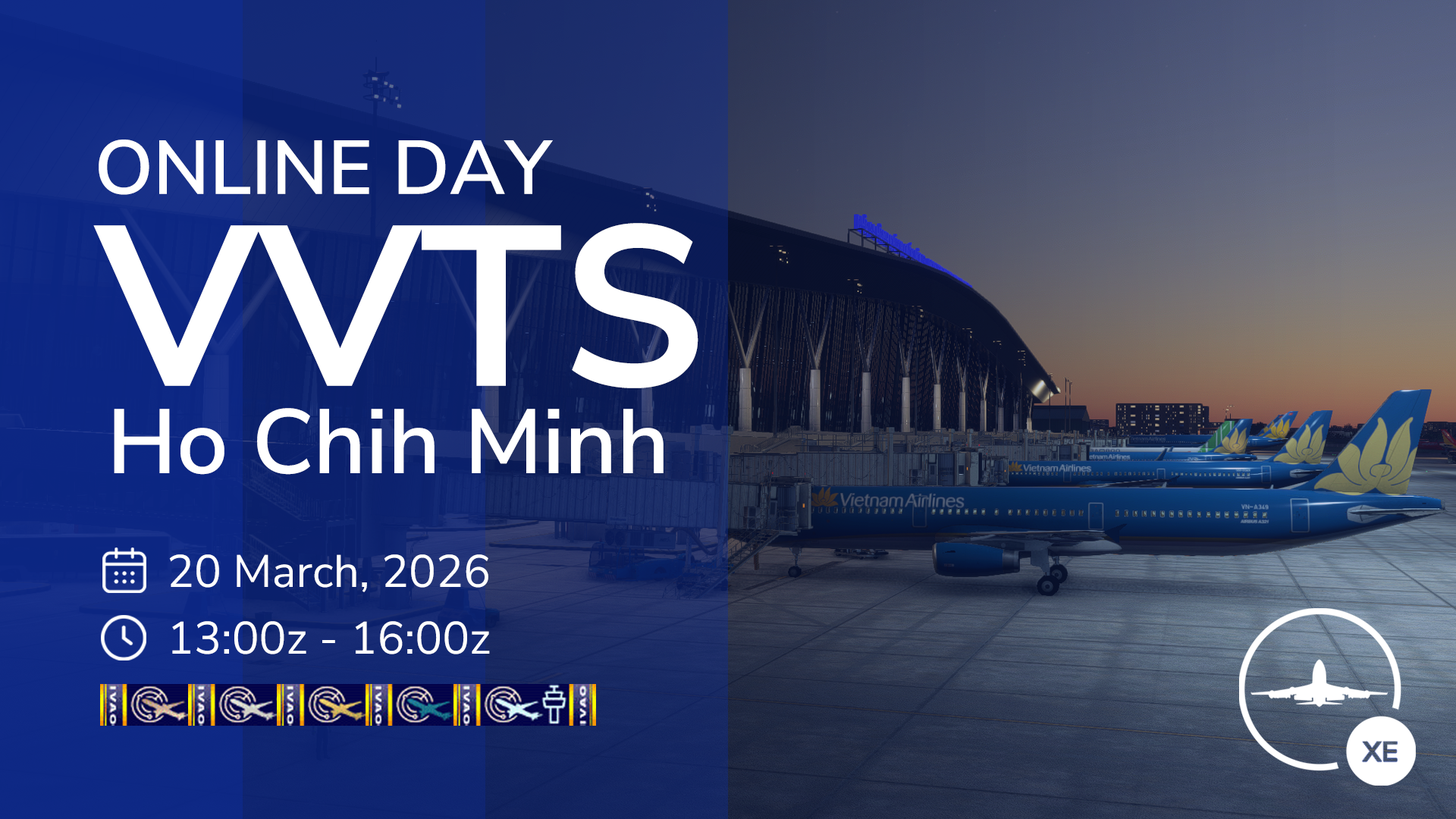
<style>
.page{position:relative;width:1456px;height:819px}
.page>*{position:absolute;margin:0}
.t1{font:75.8px "NunitoSans-SemiBold";color:#ffffff}
.t2{font:227.4px "NunitoSans-Bold";color:#ffffff}
.t3{font:90.9px "NunitoSans-SemiBold";color:#ffffff}
.t4{font:45.5px "NunitoSans-Regular";color:#ffffff}
</style>
<div class="page">
<p class="t1" style="left:99px;top:140px;width:454px;height:55px">ONLINE DAY</p>
<p class="t2" style="left:93px;top:223px;width:605px;height:165px">VVTS</p>
<p class="t3" style="left:114px;top:408px;width:550px;height:67px">Ho Chih Minh</p>
<p class="t4" style="left:169px;top:554px;width:319px;height:38px">20 March, 2026</p>
<p class="t4" style="left:172px;top:621px;width:318px;height:33px">13:00z - 16:00z</p>
</div>
